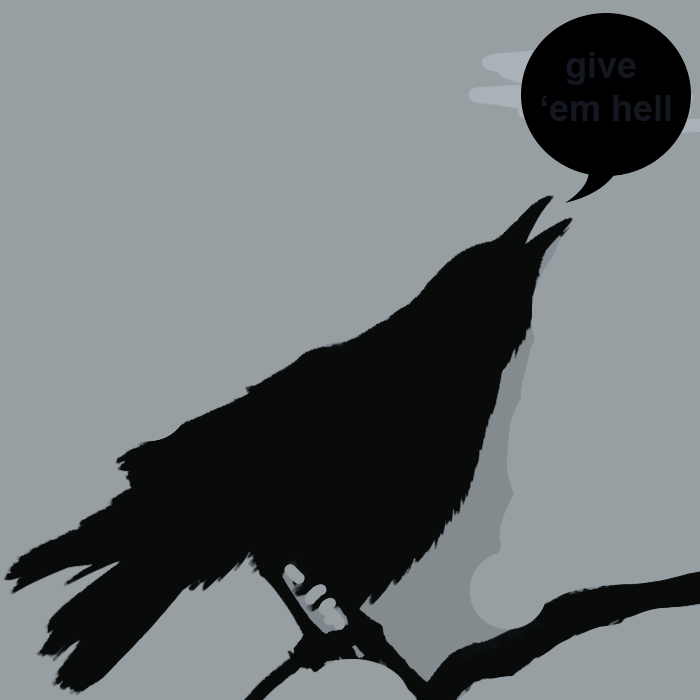
<style>
.page{position:relative;width:700px;height:700px;background:#979fa3}
.page>*{position:absolute;margin:0}
.t1{font:36px "Arial-BoldMT";color:#141620}
</style>
<div class="page">
<p class="t1" style="left:541px;top:52px;width:130px;height:69px;text-align:center">give <br>‘em hell</p>
</div>
